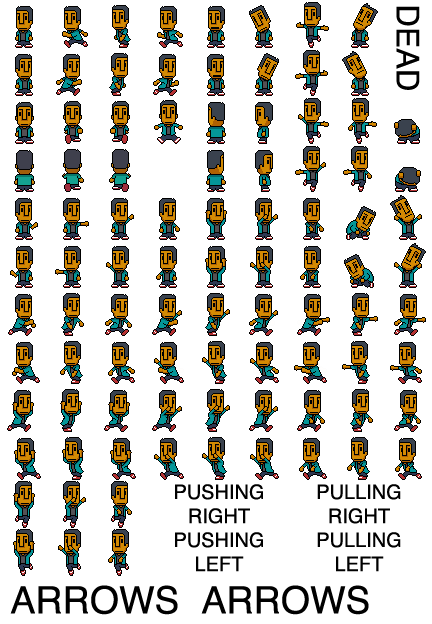
<style>
.page{position:relative;width:432px;height:624px;background:#ffffff}
.page>*{position:absolute;margin:0}
.t1{font:31.4px "Helvetica";color:#000000}
.t2{font:20px "Helvetica";color:#000000}
.t3{font:37.6px "Helvetica";color:#000000}
</style>
<div class="page">
<p class="t1" style="left:396px;top:6px;width:24px;height:84px;rotate:90deg">DEAD</p>
<p class="t2" style="left:175px;top:484px;width:88px;height:40px;text-align:center">PUSHING<br>RIGHT</p>
<p class="t2" style="left:317px;top:484px;width:84px;height:40px;text-align:center">PULLING<br>RIGHT</p>
<p class="t2" style="left:175px;top:532px;width:88px;height:40px;text-align:center">PUSHING<br>LEFTvvvvtttt</p>
<p class="t2" style="left:317px;top:532px;width:84px;height:40px;text-align:center">PULLING<br>LEFT</p>
<p class="t3" style="left:10px;top:585px;width:168px;height:30px">ARROWS</p>
<p class="t3" style="left:201px;top:585px;width:168px;height:30px">ARROWS</p>
</div>
